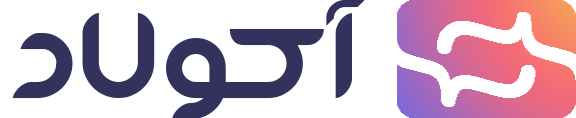
<style>
.page{position:relative;width:576px;height:118px;background:#ffffff}
.page>*{position:absolute;margin:0}
.t1{font:208px "DimaBarf-Bold2";color:#32325d}
</style>
<div class="page">
<p class="t1" style="left:12px;top:0px;width:353px;height:119px">آ  کولاد</p>
</div>
